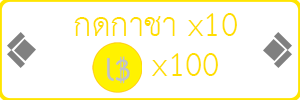
<style>
.page{position:relative;width:300px;height:100px;background:#ffffff}
.page>*{position:absolute;margin:0}
.t1{font:48px "THSarabunNew";color:#ffde00}
</style>
<div class="page">
<p class="t1" style="left:74px;top:13px;width:163px;height:23px">กดกาชา x10</p>
<p class="t1" style="left:152px;top:53px;width:66px;height:23px">x100</p>
</div>
